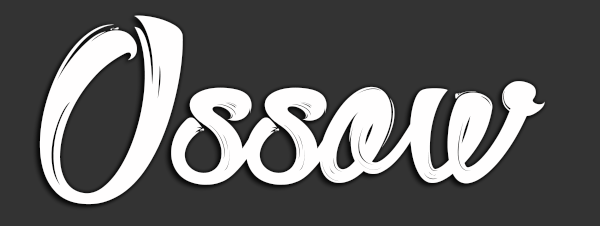
<style>
.page{position:relative;width:600px;height:226px;background:#333333}
.page>*{position:absolute;margin:0}
.t1{font:241.7px "Sketch";color:#fffefe}
</style>
<div class="page">
<p class="t1" style="left:39px;top:15px;width:506px;height:190px">Ossow</p>
</div>
